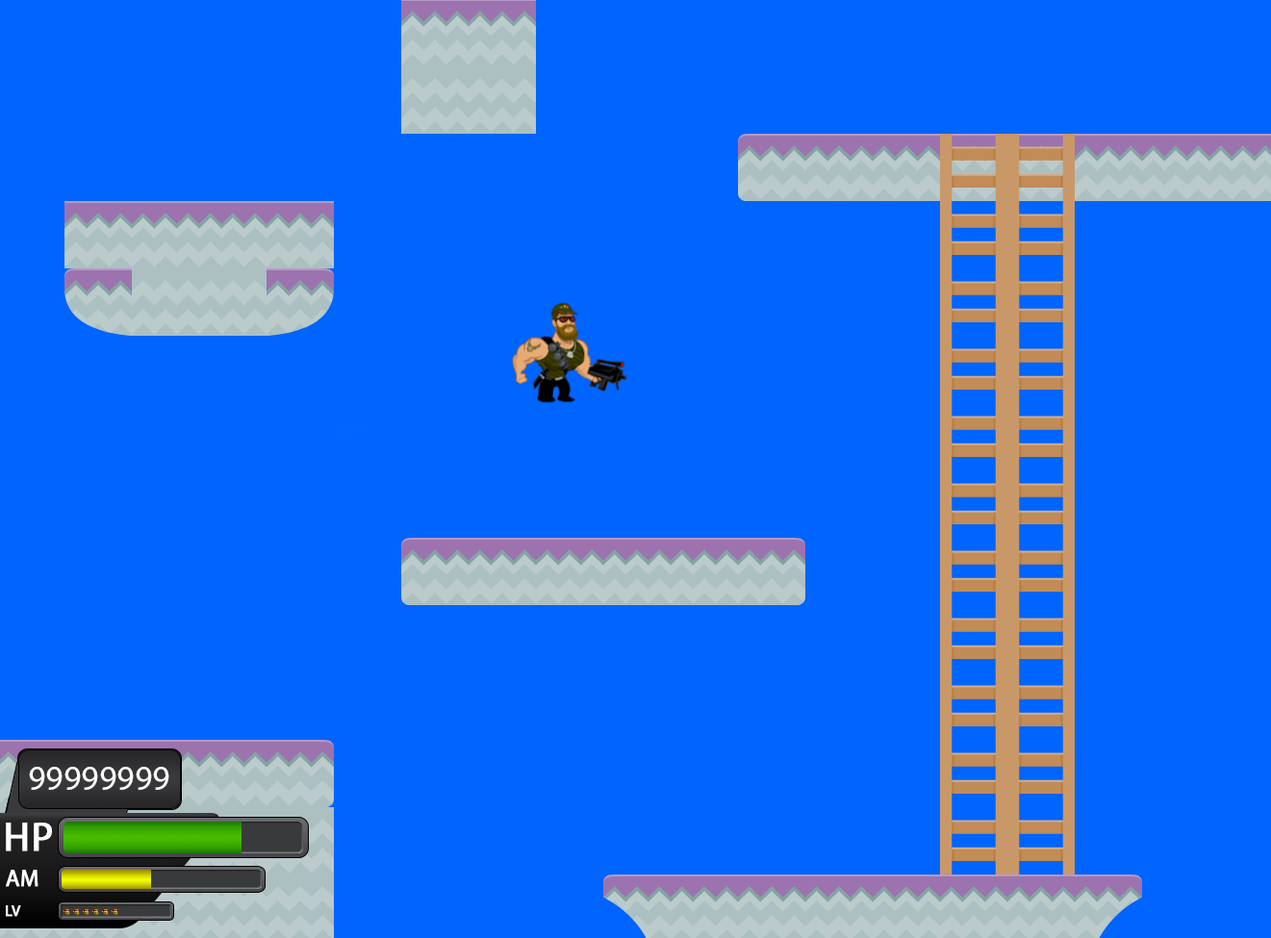
<style>
.page{position:relative;width:1271px;height:938px;background:#0064ff}
.page>*{position:absolute;margin:0}
.t1{font:34.6px "MyriadPro-Regular";color:#ffffff}
.t2{font:40.4px "MyriadPro-Regular";color:#ffffff;font-weight:bold}
.t3{font:23.1px "MyriadPro-Regular";color:#ffffff;font-weight:bold}
.t4{font:15.4px "MyriadPro-Regular";color:#ffffff;font-weight:bold}
</style>
<div class="page">
<p class="t1" style="left:29px;top:767px;width:140px;height:23px">99999999</p>
<p class="t2" style="left:6px;top:823px;width:46px;height:29px">HP</p>
<p class="t3" style="left:6px;top:870px;width:32px;height:17px">AM</p>
<p class="t4" style="left:6px;top:905px;width:15px;height:12px">LV</p>
</div>
